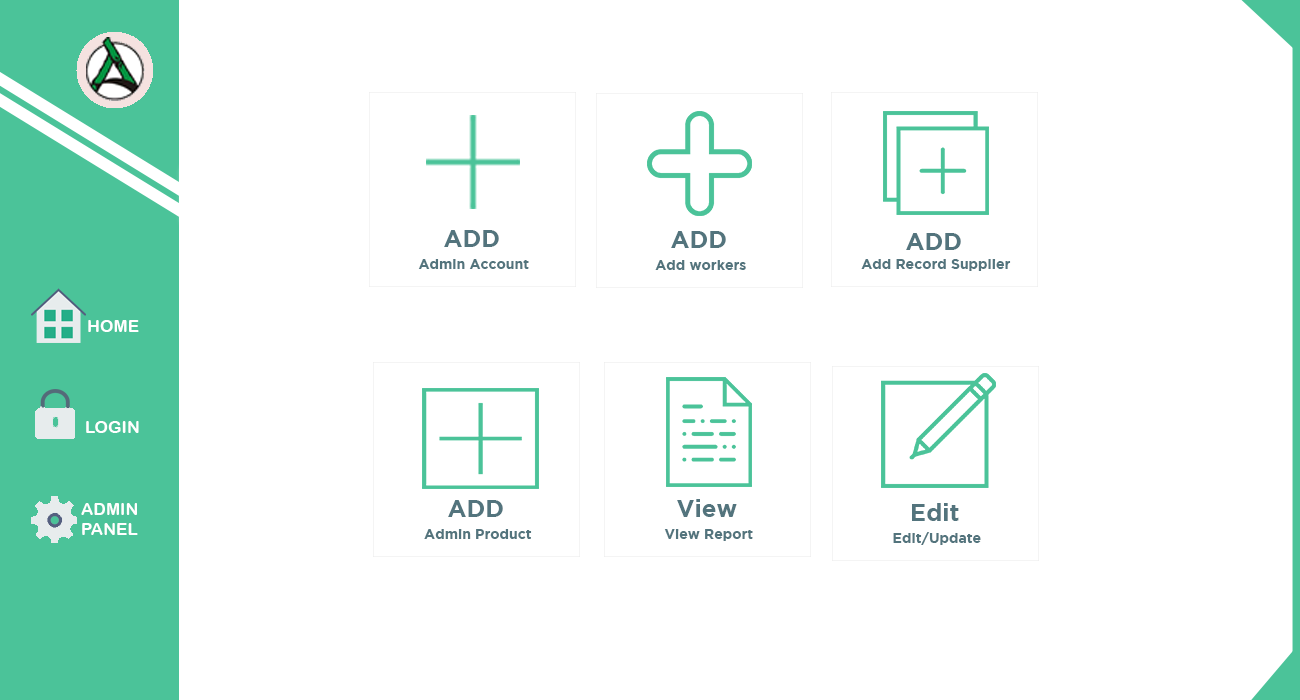
<style>
.page{position:relative;width:1300px;height:700px;background:#ffffff}
.page>*{position:absolute;margin:0}
.t1{font:24px "GothamBold";color:#53747d}
.t2{font:14px "GothamBold";color:#53747d}
.t3{font:17.1px "ArialRoundedMTBold";color:#ffffff}
</style>
<div class="page">
<p class="t1" style="left:444px;top:230px;width:55px;height:17px">ADD</p>
<p class="t1" style="left:671px;top:231px;width:55px;height:17px">ADD</p>
<p class="t1" style="left:906px;top:233px;width:55px;height:17px">ADD</p>
<p class="t2" style="left:418px;top:259px;width:111px;height:10px">Admin Account</p>
<p class="t2" style="left:655px;top:260px;width:91px;height:10px">Add workers</p>
<p class="t2" style="left:861px;top:259px;width:150px;height:12px">Add Record Supplier</p>
<p class="t3" style="left:88px;top:320px;width:51px;height:12px">HOME</p>
<p class="t3" style="left:86px;top:421px;width:53px;height:12px">LOGIN</p>
<p class="t3" style="left:81px;top:503px;width:57px;height:32px">ADMIN<br>PANEL</p>
<p class="t1" style="left:448px;top:500px;width:55px;height:17px">ADD</p>
<p class="t1" style="left:677px;top:499px;width:60px;height:18px">View</p>
<p class="t1" style="left:912px;top:503px;width:47px;height:18px">Edit</p>
<p class="t2" style="left:424px;top:529px;width:108px;height:10px">Admin Product</p>
<p class="t2" style="left:664px;top:529px;width:89px;height:12px">View Report</p>
<p class="t2" style="left:893px;top:532px;width:88px;height:13px">Edit/Update</p>
</div>
